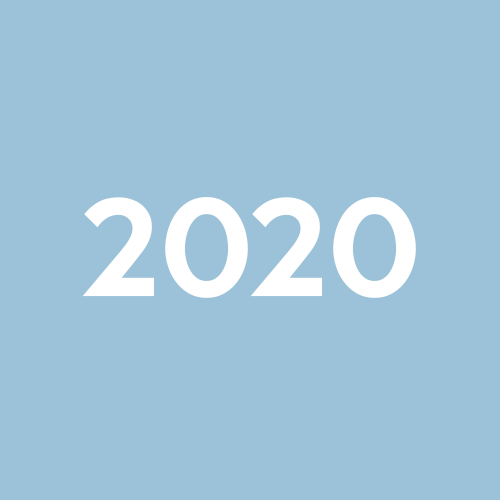
<style>
.page{position:relative;width:500px;height:500px;background:#9bc2d8}
.page>*{position:absolute;margin:0}
.t1{font:120.8px "KeepCalm-Medium";color:#ffffff}
</style>
<div class="page">
<p class="t1" style="left:82px;top:197px;width:334px;height:101px">2020</p>
</div>
